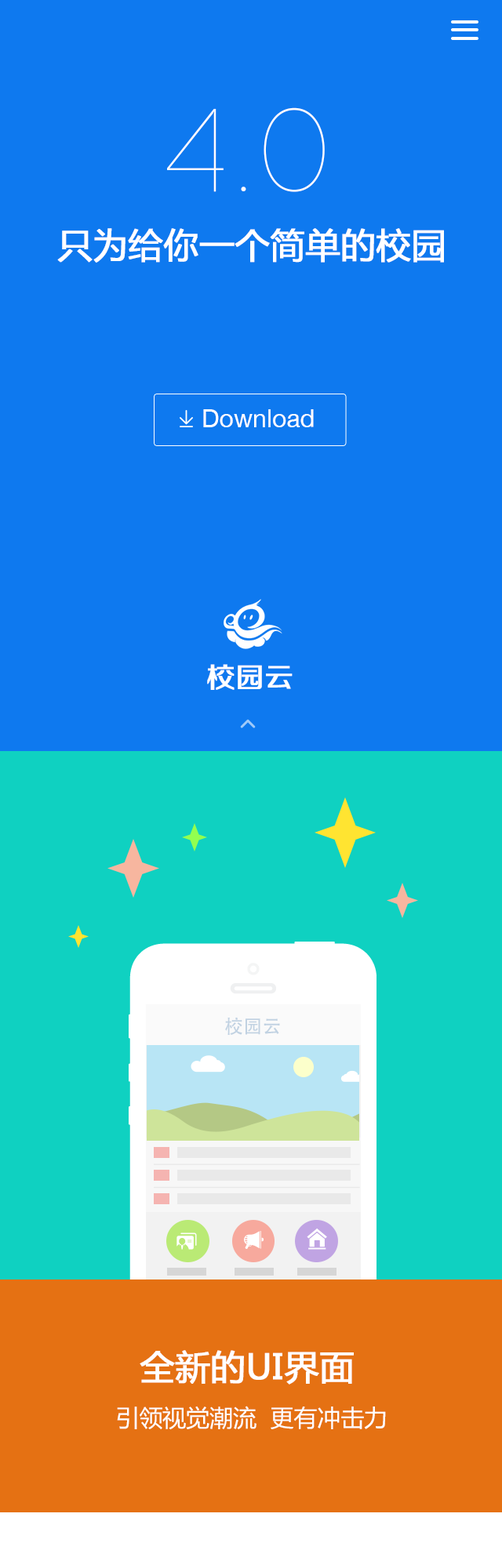
<style>
.page{position:relative;width:502px;height:1568px;background:#0e79ef}
.page>*{position:absolute;margin:0}
.t1{font:117.6px "Code-Light";letter-spacing:0.1em;color:#ffffff}
.t2{font:34.5px "MicrosoftYaHei";color:#ffffff;font-weight:bold}
.t3{font:25.1px "HelveticaNeue";color:#ffffff}
.t4{font:27.9px "FZZZHUNHJW--GB1-0";color:#ffffff;font-weight:bold}
.t5{font:18.9px "AdobeHeitiStd-Regular";color:#c1d2e2}
.t6{font:23.5px "MicrosoftYaHei";color:#ffffff}
</style>
<div class="page">
<p class="t1" style="left:167px;top:107px;width:158px;height:85px">4.0</p>
<p class="t2" style="left:57px;top:228px;width:387px;height:35px">只为给你一个简单的校园</p>
<p class="t3" style="left:203px;top:409px;width:111px;height:18px">Download</p>
<p class="t4" style="left:207px;top:664px;width:85px;height:26px">校园云</p>
<p class="t5" style="left:225px;top:1017px;width:55px;height:18px">校园云</p>
<p class="t2" style="left:140px;top:1350px;width:214px;height:35px">全新的UI界面</p>
<p class="t6" style="left:117px;top:1406px;width:269px;height:24px">引领视觉潮流  更有冲击力</p>
</div>
